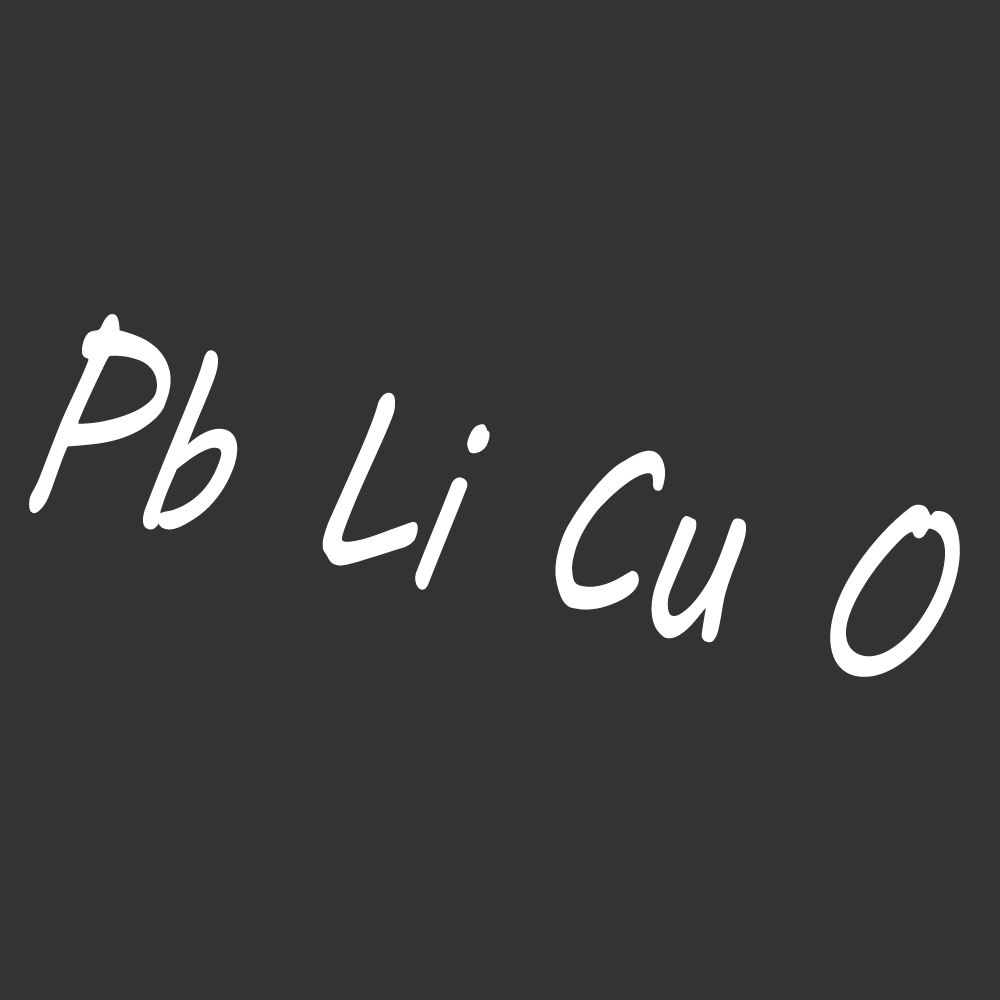
<style>
.page{position:relative;width:1000px;height:1000px;background:#333333}
.page>*{position:absolute;margin:0}
.t1{font:253.5px "MVBoli";color:#ffffff;scale:0.68 1}
</style>
<div class="page">
<p class="t1" style="left:29px;top:314px;width:931px;height:363px;rotate:12deg">Pb Li Cu O</p>
</div>
